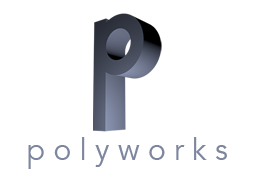
<style>
.page{position:relative;width:256px;height:192px;background:#ffffff}
.page>*{position:absolute;margin:0}
.t1{font:30px "Avenir-Book";color:#7d869f}
</style>
<div class="page">
<p class="t1" style="left:28px;top:137px;width:199px;height:32px">p o l y w o r k s</p>
</div>
